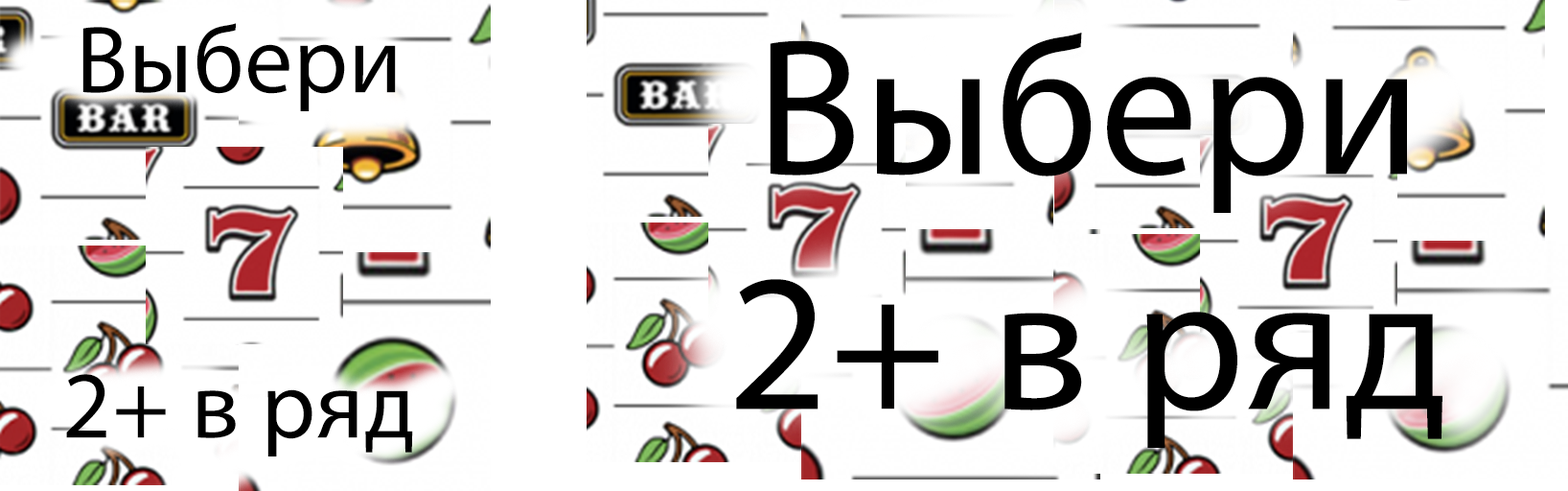
<style>
.page{position:relative;width:1568px;height:491px;background:#ffffff}
.page>*{position:absolute;margin:0}
.t1{font:95.8px "MyriadPro-Regular";letter-spacing:0.008em;color:#000000}
.t2{font:195.7px "MyriadPro-Regular";letter-spacing:0.008em;color:#000000}
</style>
<div class="page">
<p class="t1" style="left:66px;top:23px;width:347px;height:433px;text-align:center">Выбери<br><br><br>2+ в ряд</p>
<p class="t2" style="left:736px;top:33px;width:706px;height:415px;text-align:center">Выбери<br>2+ в ряд</p>
</div>
